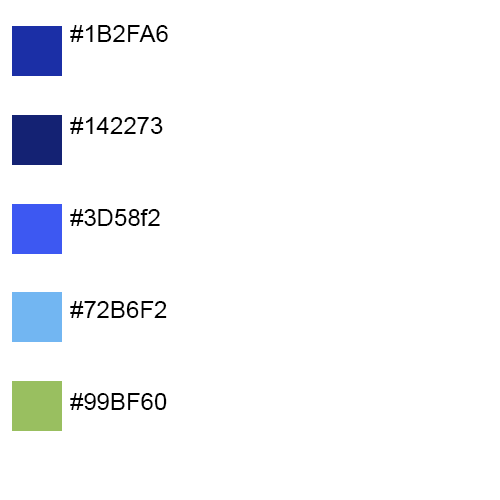
<style>
.page{position:relative;width:500px;height:500px;background:#ffffff}
.page>*{position:absolute;margin:0}
.t1{font:24px "ArialMT";color:#000000}
</style>
<div class="page">
<p class="t1" style="left:70px;top:25px;width:98px;height:17px">#1B2FA6</p>
<p class="t1" style="left:70px;top:117px;width:93px;height:17px">#142273</p>
<p class="t1" style="left:70px;top:209px;width:90px;height:17px">#3D58f2</p>
<p class="t1" style="left:70px;top:301px;width:97px;height:17px">#72B6F2</p>
<p class="t1" style="left:70px;top:393px;width:97px;height:17px">#99BF60</p>
</div>
